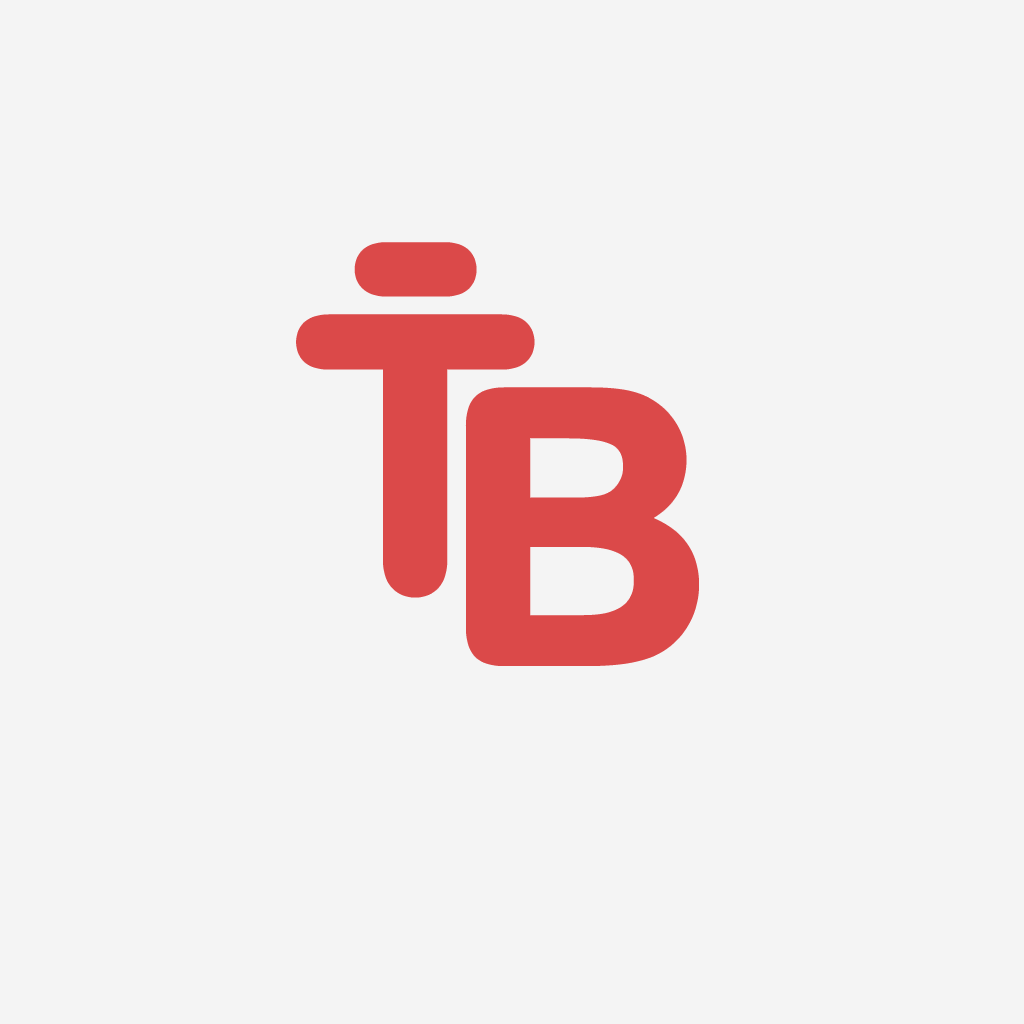
<style>
.page{position:relative;width:1024px;height:1024px;background:#f4f4f4}
.page>*{position:absolute;margin:0}
.t1{font:375px "ArialRoundedMTBold";color:#db4949}
</style>
<div class="page">
<p class="t1" style="left:359px;top:247px;width:113px;height:45px">-</p>
<p class="t1" style="left:301px;top:319px;width:229px;height:274px">T</p>
<p class="t1" style="left:470px;top:392px;width:224px;height:269px">B</p>
</div>
